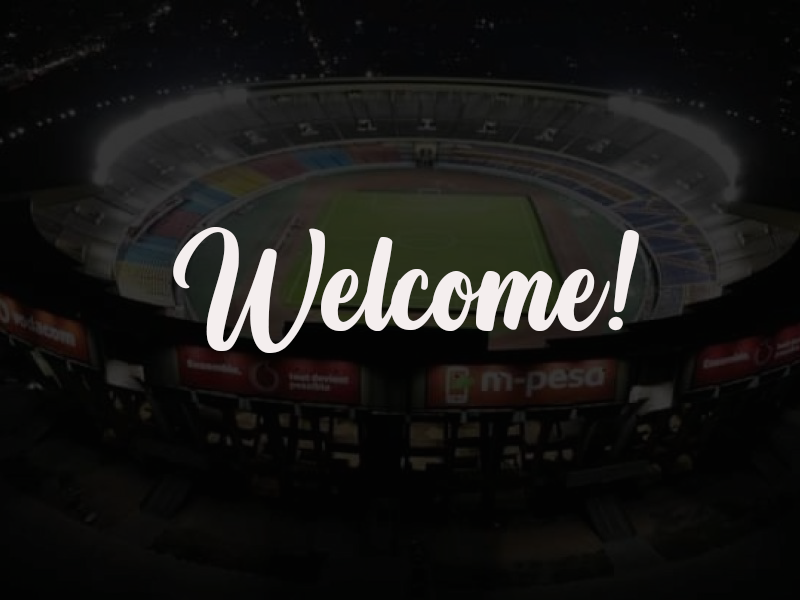
<style>
.page{position:relative;width:800px;height:600px}
.page>*{position:absolute;margin:0}
.t1{font:133.3px "Athletic-Outfit";color:#f4eeee}
</style>
<div class="page">
<p class="t1" style="left:173px;top:227px;width:466px;height:126px">Welcome!</p>
</div>
